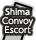
<style>
.page{position:relative;width:36px;height:40px;background:#25241f}
.page>*{position:absolute;margin:0}
.t1{font:8px/9px "UDShinGoPro-Light";color:#f7f7f7;font-weight:bold}
</style>
<div class="page">
<p class="t1" style="left:2px;top:8px;width:31px;height:26px;text-align:center">Shima<br>Convoy<br>Escort</p>
</div>
